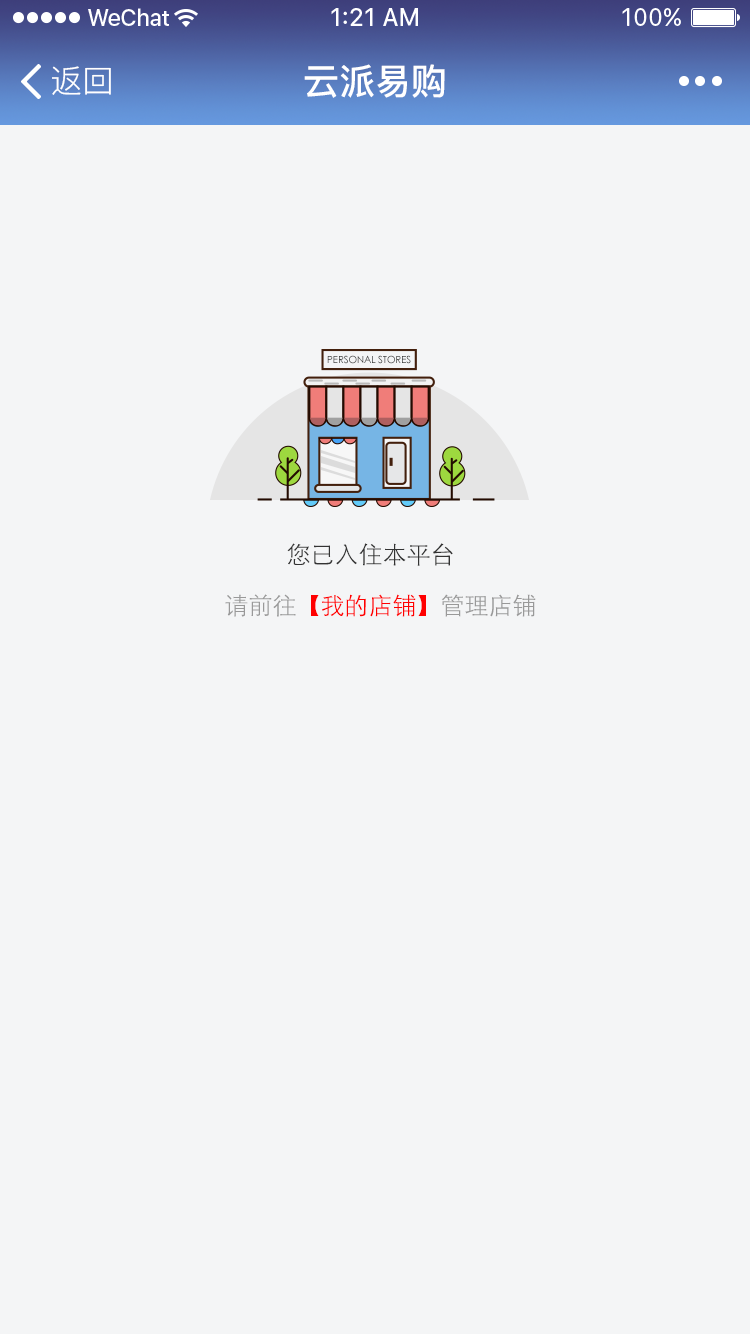
<style>
.page{position:relative;width:750px;height:1334px;background:#f4f5f6}
.page>*{position:absolute;margin:0}
.t1{font:36px "PingFang-SC-Bold";color:#ffffff}
.t2{font:32px "PingFang-SC-Regular";color:#ffffff}
.t3{font:9.6px "STXihei";text-transform:uppercase}
.t4{font:24px "STXihei";color:#333333}
.t5{font:24px "STXihei";color:#ff0000}
.t6{font:24px "STXihei";color:#999999}
</style>
<div class="page">
<p class="t1" style="left:304px;top:64px;width:141px;height:34px">云派易购</p>
<p class="t2" style="left:52px;top:66px;width:59px;height:29px">返回</p>
<p class="t3" style="left:327px;top:355px;width:84px;height:9px">personal stores</p>
<p class="t4" style="left:287px;top:543px;width:166px;height:23px">您已入住本平台</p>
<p class="t5" style="left:225px;top:594px;width:311px;height:23px"><span class="t6">请前往</span>【我的店铺】<span class="t6">管理店铺</span></p>
</div>
